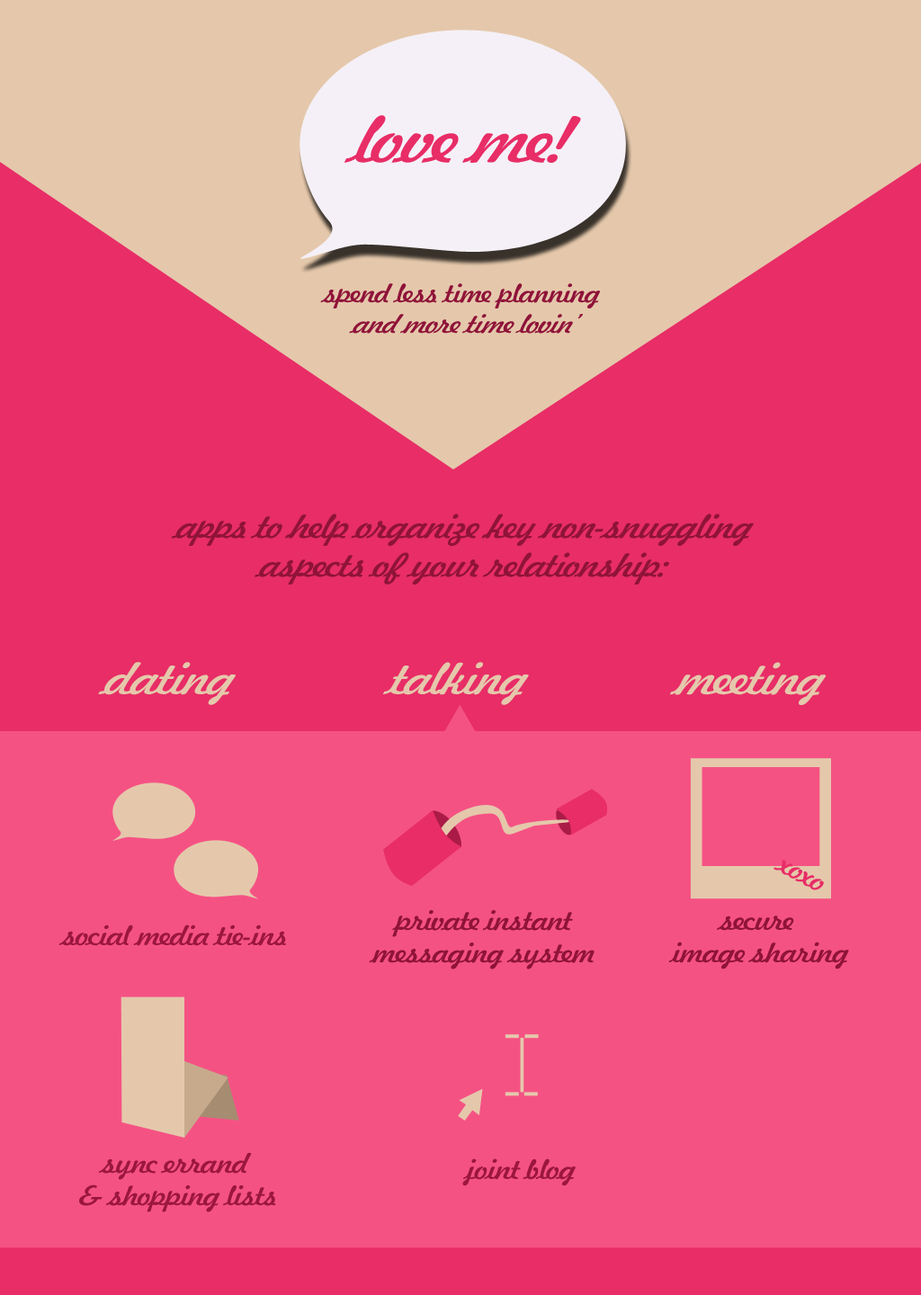
<style>
.page{position:relative;width:921px;height:1295px;background:#f55284}
.page>*{position:absolute;margin:0}
.t1{font:63.6px "Jott43WideItalic";letter-spacing:-0.05em;color:#e82d67}
.t2{font:25.4px "Jott43WideNormal";letter-spacing:-0.05em;color:#8f1339}
.t3{font:25.4px "Jott43WideItalic";letter-spacing:-0.05em;color:#8f1339}
.t4{font:32.4px "Jott43WideItalic";letter-spacing:-0.05em;color:#8f1339}
.t5{font:43.2px "Jott43WideItalic";letter-spacing:-0.05em;color:#e5c8ab}
.t6{font:27px "Jott43WideNormal";letter-spacing:-0.05em;color:#e82d67}
.t7{font:27px "Jott43WideNormal";letter-spacing:-0.05em;color:#8f1339}
.t8{font:27px "Jott43WideNormal";letter-spacing:-0.05em;color:#9b163f}
</style>
<div class="page">
<p class="t1" style="left:344px;top:115px;width:237px;height:48px">love me!</p>
<p class="t2" style="left:320px;top:283px;width:280px;height:51px;text-align:center">spend less time planning<span class="t3"> <br>and more time lovin’</span></p>
<p class="t4" style="left:171px;top:513px;width:583px;height:72px;text-align:center">apps to help organize key non-snuggling<br>aspects of your relationship:</p>
<p class="t5" style="left:98px;top:662px;width:138px;height:43px">dating</p>
<p class="t5" style="left:382px;top:662px;width:147px;height:43px">talking</p>
<p class="t5" style="left:669px;top:662px;width:157px;height:43px">meeting</p>
<p class="t6" style="left:773px;top:860px;width:51px;height:30px;rotate:28deg">xoxo</p>
<p class="t7" style="left:369px;top:910px;width:225px;height:59px;text-align:center">private instant<br>messaging system</p>
<p class="t7" style="left:668px;top:915px;width:181px;height:54px;text-align:center">secure <br>image sharing</p>
<p class="t8" style="left:58px;top:924px;width:228px;height:22px">social media tie-ins</p>
<p class="t8" style="left:79px;top:1153px;width:197px;height:59px;text-align:center">sync errand <br>&amp; shopping lists</p>
<p class="t8" style="left:462px;top:1158px;width:114px;height:28px">joint blog</p>
</div>
